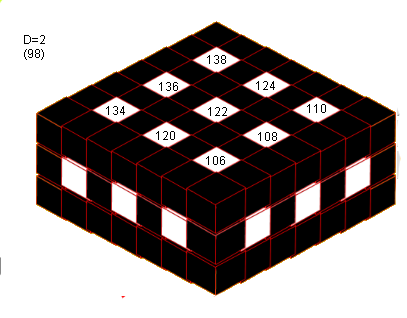
<style>
.page{position:relative;width:407px;height:318px;background:#ffffff}
.page>*{position:absolute;margin:0}
.t1{font:12px "ArialMT";color:#000000}
</style>
<div class="page">
<p class="t1" style="left:24px;top:35px;width:21px;height:25px;text-align:center">D=2<br>(98)</p>
<p class="t1" style="left:207px;top:55px;width:19px;height:9px">138</p>
<p class="t1" style="left:159px;top:82px;width:19px;height:9px">136</p>
<p class="t1" style="left:256px;top:81px;width:19px;height:9px">124</p>
<p class="t1" style="left:106px;top:106px;width:19px;height:9px">134</p>
<p class="t1" style="left:208px;top:107px;width:19px;height:9px">122</p>
<p class="t1" style="left:307px;top:104px;width:19px;height:9px">110</p>
<p class="t1" style="left:156px;top:131px;width:19px;height:9px">120</p>
<p class="t1" style="left:258px;top:132px;width:19px;height:9px">108</p>
<p class="t1" style="left:206px;top:156px;width:19px;height:9px">106</p>
</div>
